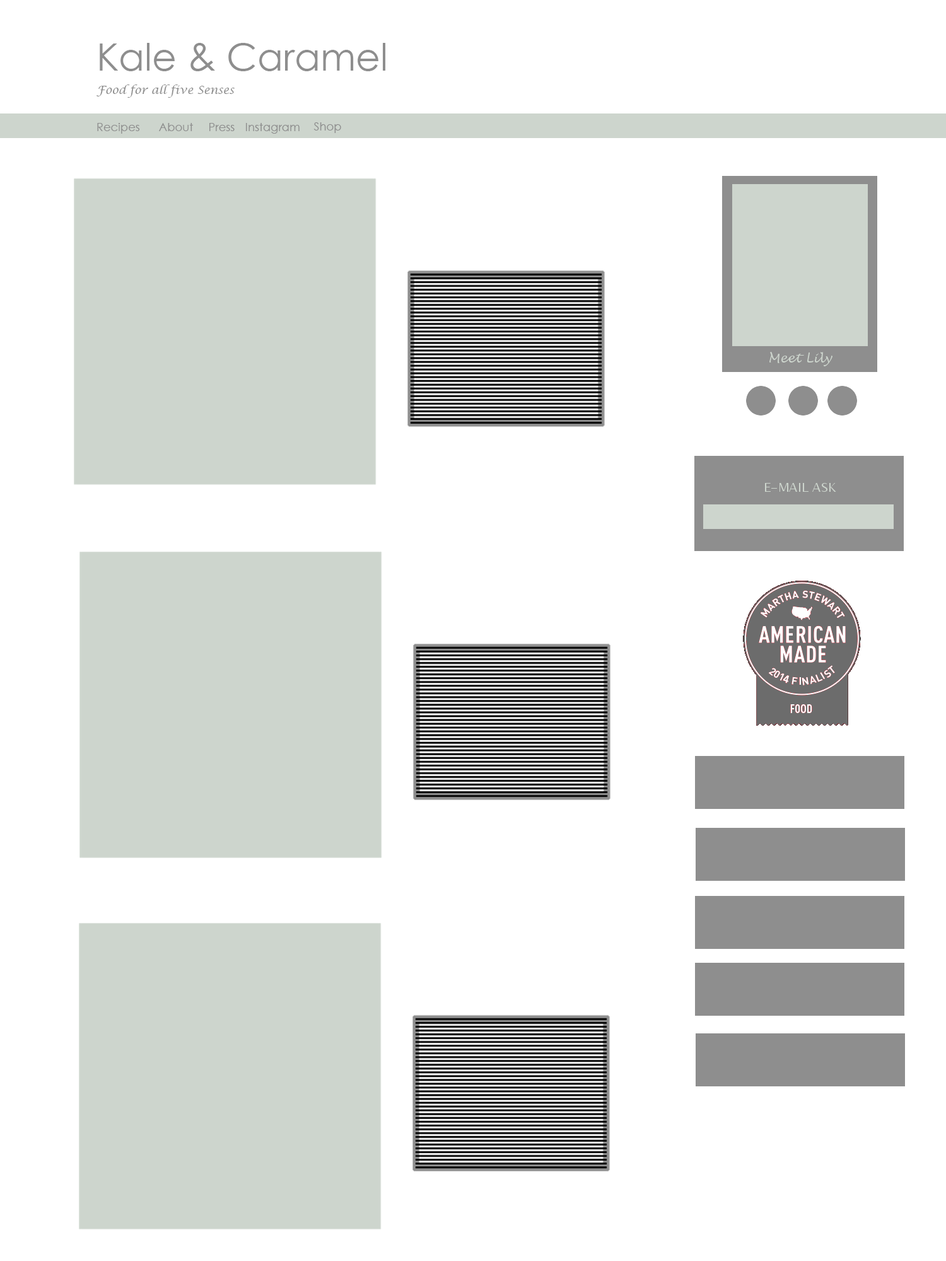
<style>
.page{position:relative;width:946px;height:1261px;background:#ffffff}
.page>*{position:absolute;margin:0}
.t1{font:37.8px "CenturyGothic";color:#8e8e8e}
.t2{font:11.3px "LucidaCalligraphy-Italic";color:#8e8e8e}
.t3{font:11.3px "CenturyGothic";color:#8e8e8e}
</style>
<div class="page">
<p class="t1" style="left:100px;top:43px;width:285px;height:28px">Kale &amp; Caramel</p>
<p class="t2" style="left:96px;top:84px;width:139px;height:14px">Food for all five Senses</p>
<p class="t3" style="left:97px;top:123px;width:43px;height:11px">Recipes</p>
<p class="t3" style="left:159px;top:123px;width:34px;height:8px">About</p>
<p class="t3" style="left:209px;top:123px;width:26px;height:8px">Press</p>
<p class="t3" style="left:246px;top:123px;width:53px;height:11px">Instagram</p>
<p class="t3" style="left:313px;top:122px;width:28px;height:11px">Shop</p>
</div>
